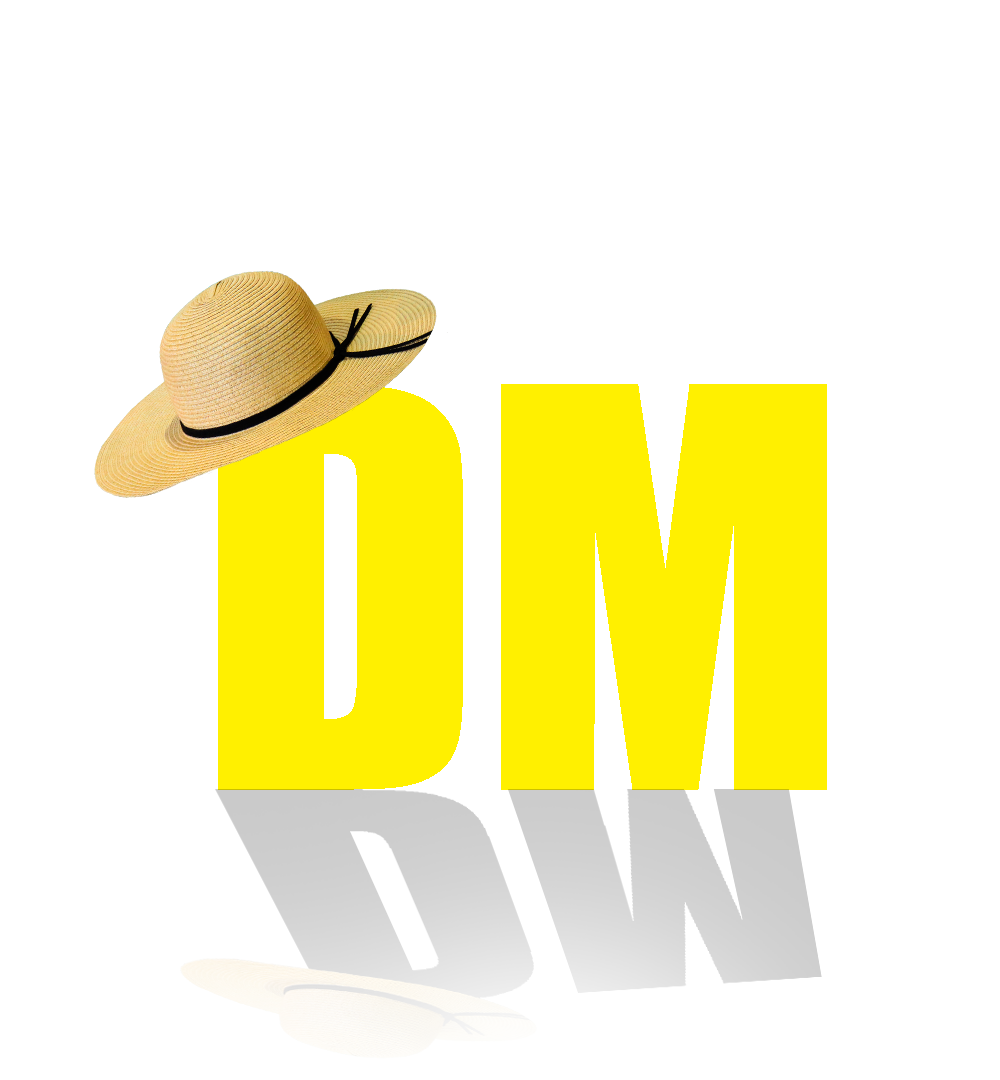
<style>
.page{position:relative;width:1000px;height:1080px;background:#ffffff}
.page>*{position:absolute;margin:0}
.t1{font:512px "Impact";color:#fff000}
</style>
<div class="page">
<p class="t1" style="left:218px;top:384px;width:609px;height:406px">DM</p>
</div>
